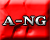
<style>
.page{position:relative;width:50px;height:40px}
.page>*{position:absolute;margin:0}
.t1{font:11.2px "MyungjoXB-HM";scale:1.53 1}
</style>
<div class="page">
<p class="t1" style="left:2px;top:16px;width:45px;height:9px">A-NG</p>
</div>
